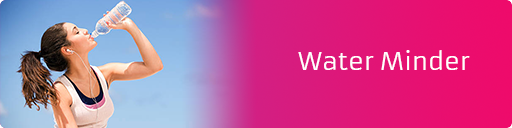
<style>
.page{position:relative;width:512px;height:128px}
.page>*{position:absolute;margin:0}
.t1{font:24px "Armata-Regular";color:#ffffff}
</style>
<div class="page">
<p class="t1" style="left:298px;top:50px;width:172px;height:20px">Water Minder</p>
</div>
